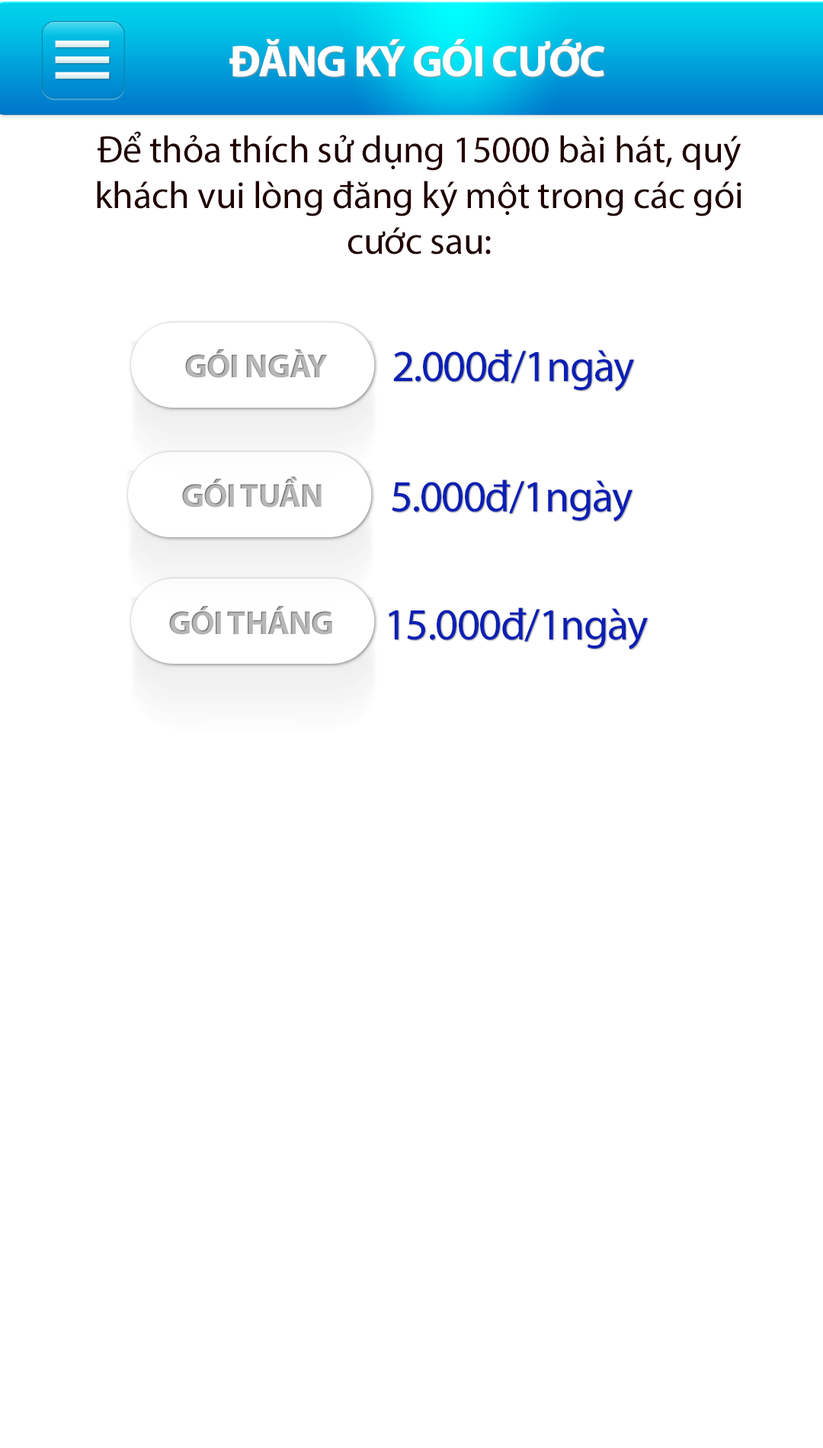
<style>
.page{position:relative;width:823px;height:1448px;background:#ffffff}
.page>*{position:absolute;margin:0}
.t1{font:44.5px "MyriadPro-Bold";letter-spacing:-0.025em;color:#fffefe}
.t2{font:38.1px "MyriadPro-Regular";letter-spacing:-0.005em;color:#200100}
.t3{font:33.5px "MyriadPro-Bold";letter-spacing:-0.02em;color:#b4b4b4}
.t4{font:44.5px "MyriadPro-Regular";letter-spacing:-0.025em;color:#0b1fb4}
</style>
<div class="page">
<p class="t1" style="left:229px;top:39px;width:376px;height:38px">ĐĂNG KÝ GÓI CƯỚC</p>
<p class="t2" style="left:97px;top:131px;width:645px;height:124px;text-align:center">Để thỏa thích sử dụng 15000 bài hát, quý khách vui lòng đăng ký một trong các gói cước sau:</p>
<p class="t3" style="left:185px;top:349px;width:143px;height:29px">GÓI NGÀY</p>
<p class="t4" style="left:393px;top:349px;width:241px;height:42px">2.000đ/1ngày</p>
<p class="t3" style="left:182px;top:476px;width:140px;height:32px">GÓI TUẦN</p>
<p class="t4" style="left:392px;top:479px;width:241px;height:42px">5.000đ/1ngày</p>
<p class="t3" style="left:169px;top:606px;width:163px;height:29px">GÓI THÁNG</p>
<p class="t4" style="left:389px;top:608px;width:259px;height:41px">15.000đ/1ngày</p>
</div>
